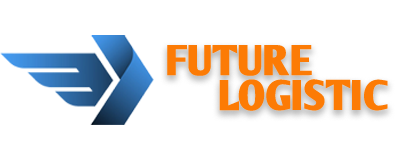
<style>
.page{position:relative;width:400px;height:150px;background:#ffffff}
.page>*{position:absolute;margin:0}
.t1{font:41.9px/34.9px "ArmWrestler-Bold";letter-spacing:-0.01em;color:#fc7b05}
</style>
<div class="page">
<p class="t1" style="left:167px;top:45px;width:221px;height:66px">FUTURE<br>      LOGISTIC</p>
</div>
